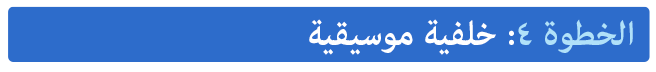
<style>
.page{position:relative;width:656px;height:72px;background:#2d6ccb}
.page>*{position:absolute;margin:0}
.t1{font:48px "AdobeArabic-Bold";color:#ffffff}
.t2{font:48px "AdobeArabic-Bold";color:#b0e1f9}
</style>
<div class="page">
<p class="t1" style="left:309px;top:19px;width:324px;height:36px"><span class="t2">الخطوة ٤</span>: خلفية موسيقية</p>
</div>
